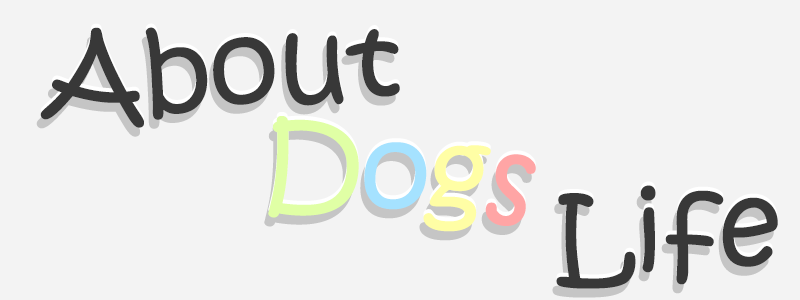
<style>
.page{position:relative;width:800px;height:300px;background:#f3f3f3}
.page>*{position:absolute;margin:0}
.t1{font:110px "KristenITC-Regular";color:#383838}
.t2{font:110px "KristenITC-Regular";color:#e0ffa5}
.t3{font:110px "KristenITC-Regular";color:#a5e2ff}
.t4{font:110px "KristenITC-Regular";color:#fffea5}
.t5{font:110px "KristenITC-Regular";color:#ffa5a5}
</style>
<div class="page">
<p class="t1" style="left:40px;top:27px;width:360px;height:101px;rotate:-4deg">About</p>
<p class="t2" style="left:268px;top:116px;width:268px;height:116px;rotate:5deg">D<span class="t3">o</span><span class="t4">g</span><span class="t5">s</span></p>
<p class="t1" style="left:556px;top:185px;width:222px;height:104px;rotate:-3deg">Life</p>
</div>
